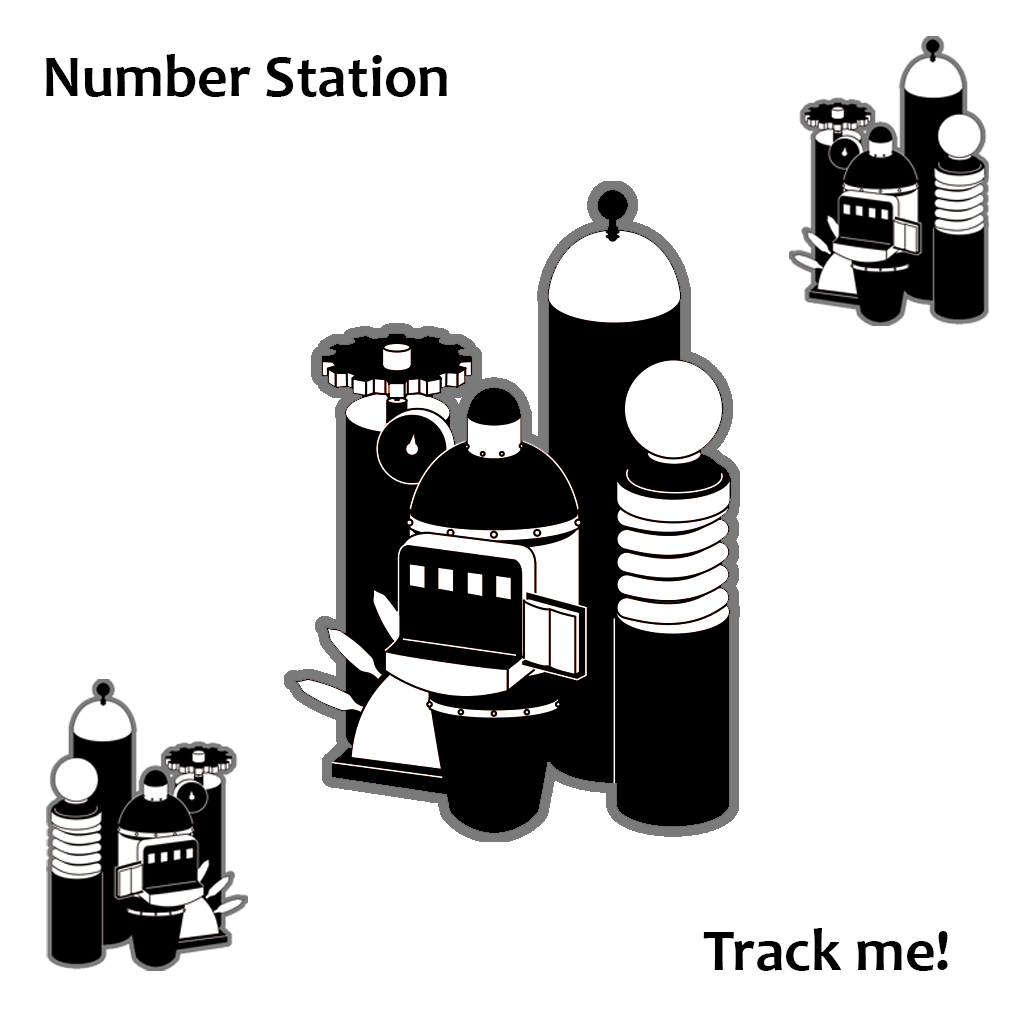
<style>
.page{position:relative;width:1024px;height:1024px;background:#ffffff}
.page>*{position:absolute;margin:0}
.t1{font:60px "Candara-Bold";color:#000000}
</style>
<div class="page">
<p class="t1" style="left:46px;top:54px;width:401px;height:43px">Number Station</p>
<p class="t1" style="left:703px;top:928px;width:245px;height:43px">Track me!</p>
</div>
